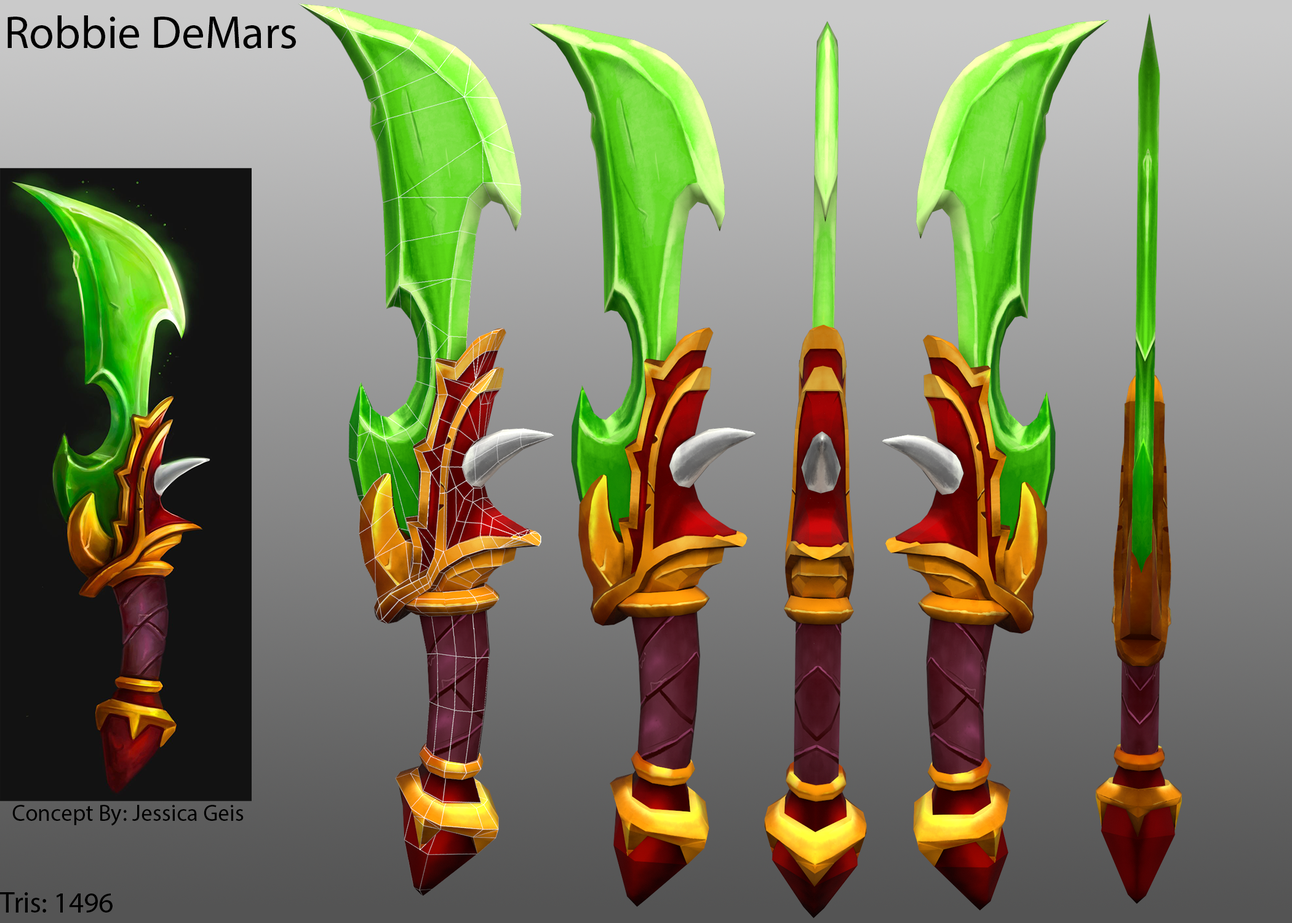
<style>
.page{position:relative;width:1292px;height:923px}
.page>*{position:absolute;margin:0}
.t1{font:46.1px "MyriadPro-Regular";color:#000000}
.t2{font:23.2px "MyriadPro-Regular";color:#000000}
.t3{font:29.2px "MyriadPro-Regular";color:#000000}
</style>
<div class="page">
<p class="t1" style="left:7px;top:15px;width:289px;height:34px">Robbie DeMars</p>
<p class="t2" style="left:12px;top:805px;width:232px;height:21px">Concept By: Jessica Geis</p>
<p class="t3" style="left:0px;top:892px;width:113px;height:20px">Tris: 1496</p>
</div>
